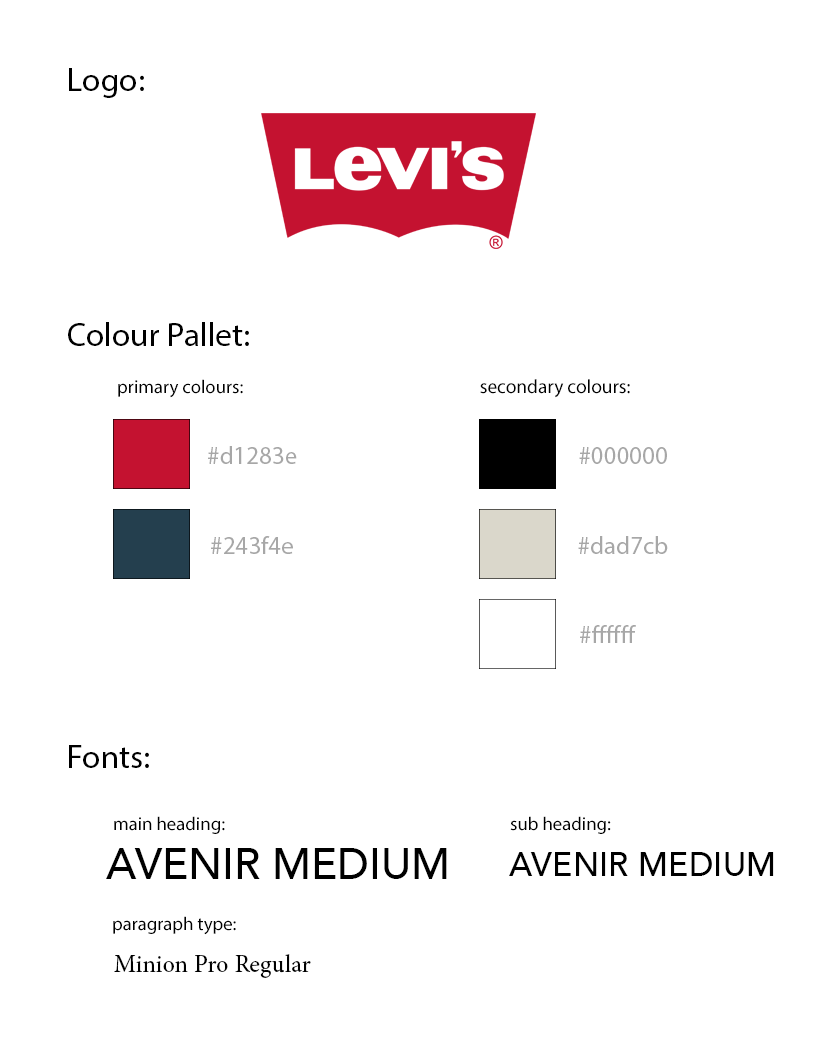
<style>
.page{position:relative;width:818px;height:1039px;background:#ffffff}
.page>*{position:absolute;margin:0}
.t1{font:33.3px "MyriadPro-Regular";color:#000000}
.t2{font:18.7px "MyriadPro-Regular";color:#000000}
.t3{font:19.4px "MyriadPro-Regular";color:#000000}
.t4{font:25px "MyriadPro-Regular";color:#a7a7a7}
.t5{font:42.9px "Avenir-Medium";color:#000000}
.t6{font:33.3px "Avenir-Medium";color:#000000}
.t7{font:25px "MinionPro-Regular";color:#000000}
</style>
<div class="page">
<p class="t1" style="left:69px;top:68px;width:75px;height:30px">Logo:</p>
<p class="t1" style="left:68px;top:322px;width:181px;height:24px">Colour Pallet:</p>
<p class="t2" style="left:118px;top:379px;width:125px;height:19px">primary colours:</p>
<p class="t3" style="left:480px;top:379px;width:150px;height:19px">secondary colours:</p>
<p class="t4" style="left:208px;top:446px;width:89px;height:18px">#d1283e</p>
<p class="t4" style="left:579px;top:447px;width:88px;height:17px">#000000</p>
<p class="t4" style="left:211px;top:536px;width:82px;height:18px">#243f4e</p>
<p class="t4" style="left:578px;top:536px;width:90px;height:18px">#dad7cb</p>
<p class="t4" style="left:580px;top:625px;width:56px;height:18px">#ffffff</p>
<p class="t1" style="left:69px;top:745px;width:80px;height:23px">Fonts:</p>
<p class="t2" style="left:114px;top:816px;width:111px;height:18px">main heading:</p>
<p class="t2" style="left:510px;top:816px;width:101px;height:18px">sub heading:</p>
<p class="t5" style="left:106px;top:848px;width:341px;height:31px">AVENIR MEDIUM</p>
<p class="t6" style="left:509px;top:852px;width:265px;height:24px">AVENIR MEDIUM</p>
<p class="t2" style="left:113px;top:916px;width:123px;height:19px">paragraph type:</p>
<p class="t7" style="left:114px;top:954px;width:197px;height:24px">Minion Pro Regular</p>
</div>
